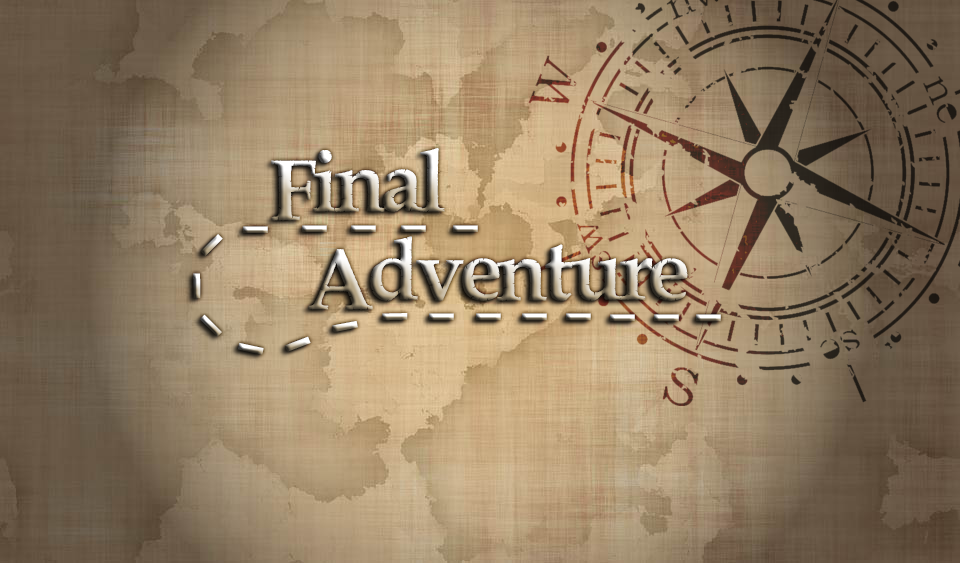
<style>
.page{position:relative;width:960px;height:563px}
.page>*{position:absolute;margin:0}
.t1{font:90px "PiratesBay"}
.t2{font:100px "MyriadPro-Regular"}
</style>
<div class="page">
<p class="t1" style="left:271px;top:148px;width:174px;height:73px">Final</p>
<p class="t2" style="left:200px;top:234px;width:23px;height:22px;rotate:-45deg">-</p>
<p class="t1" style="left:308px;top:236px;width:380px;height:74px">Adventure</p>
<p class="t2" style="left:193px;top:273px;width:8px;height:26px;rotate:-91deg">-</p>
<p class="t2" style="left:200px;top:314px;width:22px;height:23px;rotate:45deg">-</p>
<p class="t2" style="left:382px;top:313px;width:26px;height:8px;rotate:-1deg">-</p>
<p class="t2" style="left:429px;top:313px;width:25px;height:8px">-</p>
<p class="t2" style="left:476px;top:313px;width:25px;height:8px">-</p>
<p class="t2" style="left:522px;top:313px;width:25px;height:8px">-</p>
<p class="t2" style="left:566px;top:313px;width:25px;height:8px">-</p>
<p class="t2" style="left:610px;top:314px;width:25px;height:8px">-</p>
<p class="t2" style="left:654px;top:314px;width:25px;height:8px">-</p>
<p class="t2" style="left:696px;top:314px;width:25px;height:8px">-</p>
<p class="t2" style="left:332px;top:321px;width:26px;height:12px;rotate:-11deg">-</p>
<p class="t2" style="left:284px;top:336px;width:27px;height:16px;rotate:-21deg">-</p>
<p class="t2" style="left:237px;top:343px;width:27px;height:12px;rotate:12deg">-</p>
</div>
